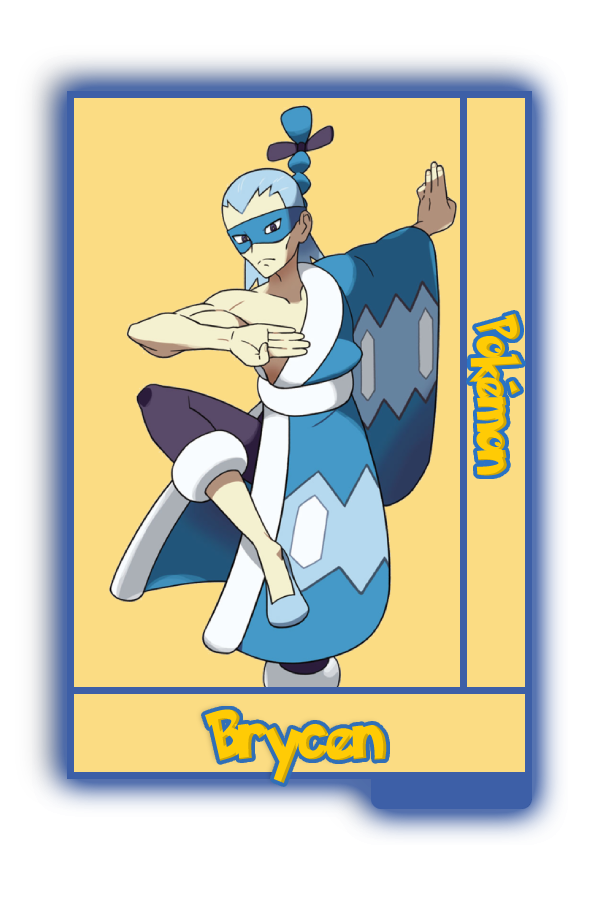
<style>
.page{position:relative;width:600px;height:900px;background:#fbdc83}
.page>*{position:absolute;margin:0}
.t1{font:48.8px "PokemonSolidNormal";color:#ffcb05;scale:0.8 1}
.t2{font:56.6px "PokemonSolidNormal";color:#ffcb05;scale:0.92 1}
</style>
<div class="page">
<p class="t1" style="left:469px;top:313px;width:54px;height:163px;rotate:90deg">Pokémon</p>
<p class="t2" style="left:204px;top:709px;width:183px;height:74px">Brycen</p>
</div>
